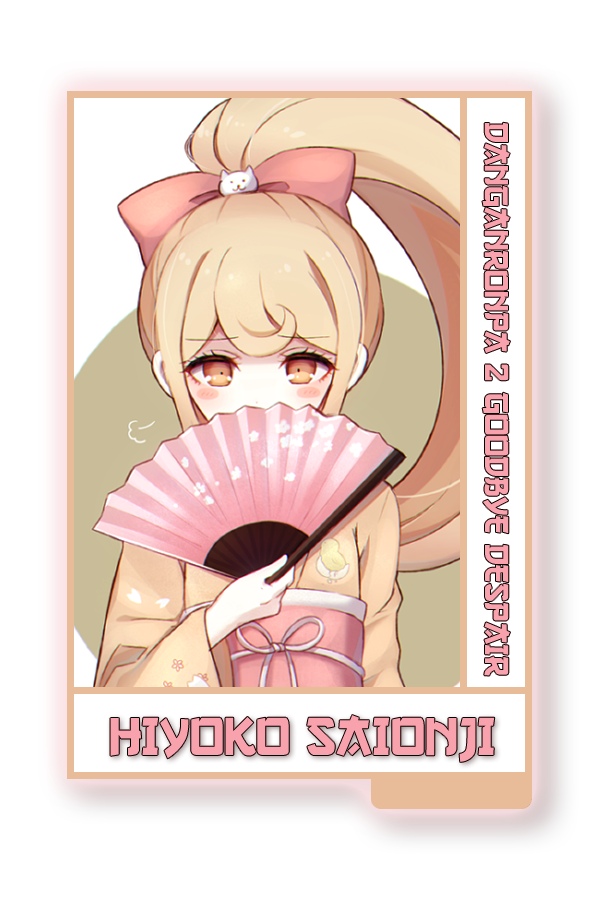
<style>
.page{position:relative;width:600px;height:900px;background:#ffffff}
.page>*{position:absolute;margin:0}
.t1{font:34.9px "GangofThree";color:#f6b3bd}
.t2{font:56px "GangofThree";color:#f6b3bd}
</style>
<div class="page">
<p class="t1" style="left:482px;top:122px;width:28px;height:554px;rotate:90deg">DANGANRONPA 2 GOODBYE DESPAIR</p>
<p class="t2" style="left:110px;top:715px;width:385px;height:47px">HIYOKO SAIONJI</p>
</div>
